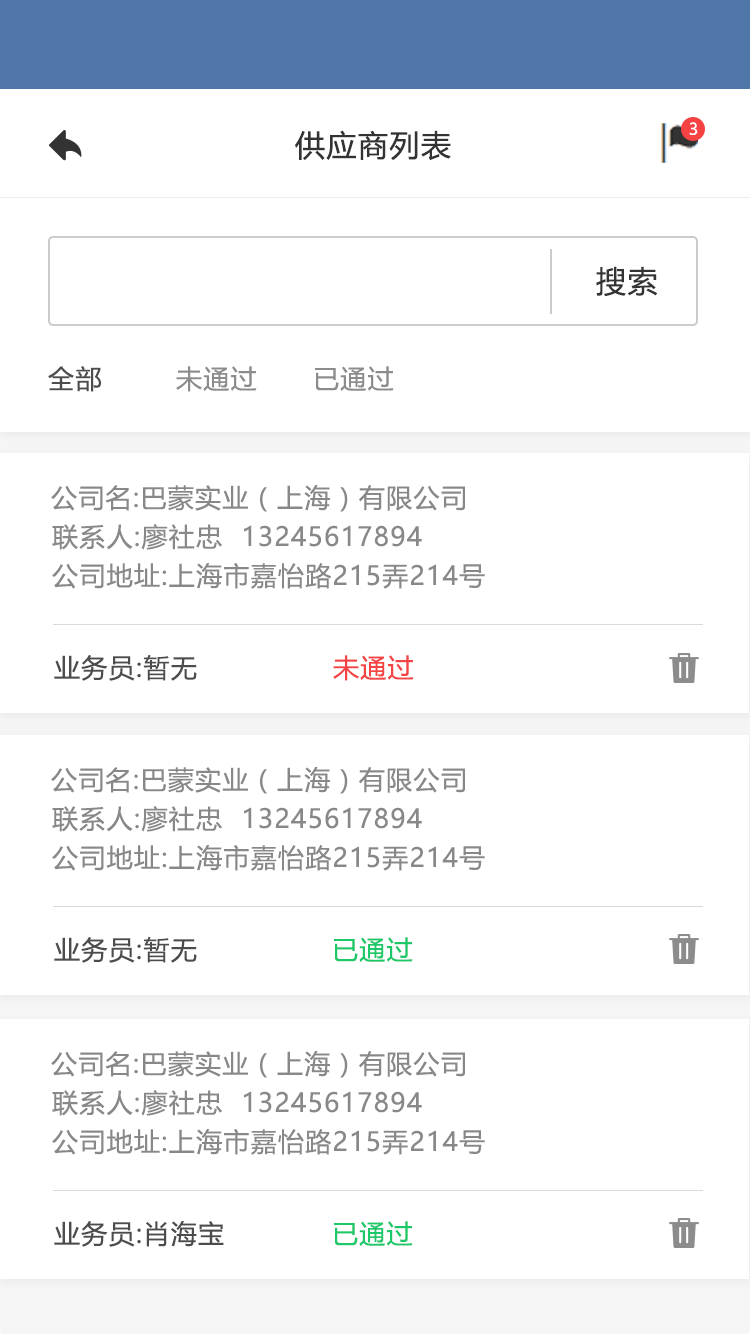
<style>
.page{position:relative;width:750px;height:1334px;background:#ffffff}
.page>*{position:absolute;margin:0}
.t1{font:16px "MicrosoftYaHeiUI";color:#ffffff}
.t2{font:30px "MicrosoftYaHeiUI";letter-spacing:0.05em;color:#333333}
.t3{font:26px "MicrosoftYaHeiUI";letter-spacing:0.05em;color:#4c4c4c}
.t4{font:26px "MicrosoftYaHeiUI";letter-spacing:0.05em;color:#8c8c8c}
.t5{font:26px "MicrosoftYaHeiUI";letter-spacing:0.05em;color:#888888}
.t6{font:26px "MicrosoftYaHeiUI";letter-spacing:0.05em;color:#f54343}
.t7{font:26px "MicrosoftYaHeiUI";letter-spacing:0.05em;color:#1dc869}
</style>
<div class="page">
<p class="t1" style="left:689px;top:122px;width:9px;height:13px">3</p>
<p class="t2" style="left:295px;top:130px;width:156px;height:31px">供应商列表</p>
<p class="t2" style="left:596px;top:266px;width:62px;height:30px">搜索</p>
<p class="t3" style="left:48px;top:366px;width:53px;height:26px">全部</p>
<p class="t4" style="left:176px;top:366px;width:81px;height:26px">未通过</p>
<p class="t4" style="left:315px;top:366px;width:79px;height:25px">已通过</p>
<p class="t5" style="left:51px;top:485px;width:414px;height:27px">公司名:巴蒙实业（上海）有限公司</p>
<p class="t5" style="left:52px;top:524px;width:370px;height:26px">联系人:廖社忠  13245617894</p>
<p class="t5" style="left:52px;top:563px;width:433px;height:26px">公司地址:上海市嘉怡路215弄214号</p>
<p class="t3" style="left:54px;top:654px;width:143px;height:27px">业务员:暂无</p>
<p class="t6" style="left:333px;top:655px;width:81px;height:26px">未通过</p>
<p class="t5" style="left:51px;top:767px;width:414px;height:27px">公司名:巴蒙实业（上海）有限公司</p>
<p class="t5" style="left:52px;top:806px;width:370px;height:26px">联系人:廖社忠  13245617894</p>
<p class="t5" style="left:52px;top:845px;width:433px;height:26px">公司地址:上海市嘉怡路215弄214号</p>
<p class="t3" style="left:54px;top:936px;width:143px;height:27px">业务员:暂无</p>
<p class="t7" style="left:334px;top:937px;width:79px;height:25px">已通过</p>
<p class="t5" style="left:51px;top:1051px;width:414px;height:27px">公司名:巴蒙实业（上海）有限公司</p>
<p class="t5" style="left:52px;top:1090px;width:370px;height:26px">联系人:廖社忠  13245617894</p>
<p class="t5" style="left:52px;top:1129px;width:433px;height:26px">公司地址:上海市嘉怡路215弄214号</p>
<p class="t3" style="left:54px;top:1221px;width:170px;height:26px">业务员:肖海宝</p>
<p class="t7" style="left:334px;top:1221px;width:79px;height:25px">已通过</p>
</div>
